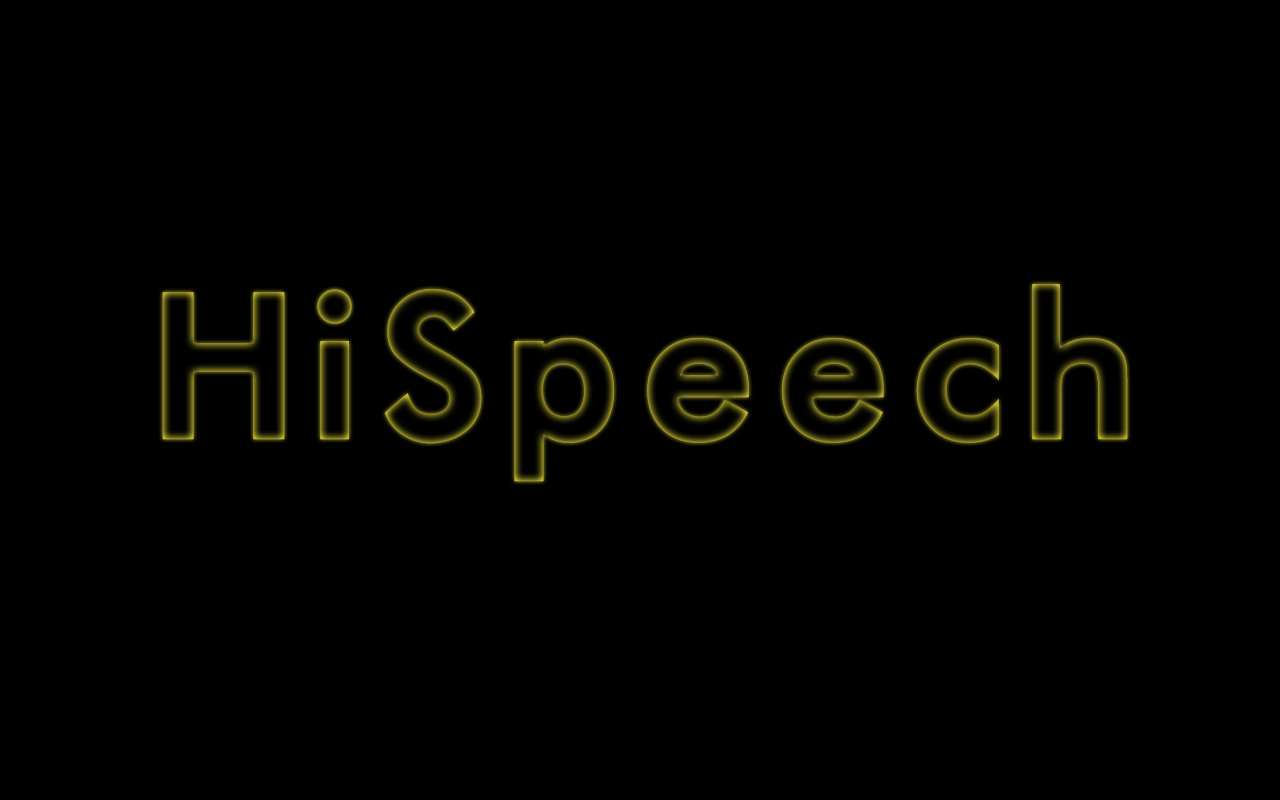
<style>
.page{position:relative;width:1280px;height:800px;background:#000000}
.page>*{position:absolute;margin:0}
.t1{font:200px "MotorOil1937M54";letter-spacing:0.08em}
</style>
<div class="page">
<p class="t1" style="left:162px;top:284px;width:966px;height:198px">HiSpeech</p>
</div>
